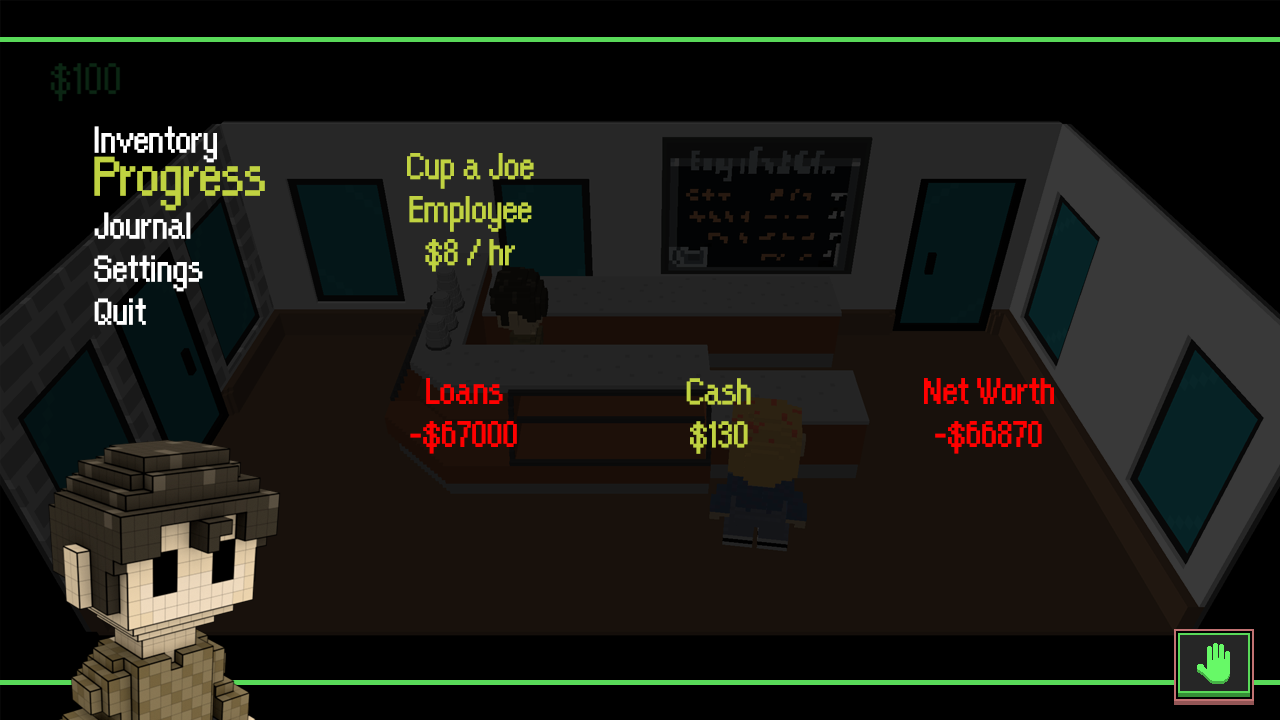
<style>
.page{position:relative;width:1280px;height:720px;background:#000000}
.page>*{position:absolute;margin:0}
.t1{font:40px/43px "OrangeKid";letter-spacing:-0.01em;color:#ffffff}
.t2{font:60px/43px "OrangeKid";letter-spacing:-0.01em;color:#c0d240}
.t3{font:40px/43px "OrangeKid";letter-spacing:-0.01em;color:#c0d241}
.t4{font:40px/43px "OrangeKid";letter-spacing:-0.01em;color:#ff0000}
</style>
<div class="page">
<p class="t1" style="left:94px;top:126px;width:171px;height:199px">Inventory<br><span class="t2">Progress<br></span>Journal<br>Settings<br>Quit</p>
<p class="t3" style="left:407px;top:153px;width:127px;height:119px;text-align:center">Cup a Joe<br>Employee<br>$8 / hr</p>
<p class="t4" style="left:410px;top:378px;width:107px;height:76px;text-align:center">Loans<br>-$67000</p>
<p class="t3" style="left:686px;top:378px;width:65px;height:76px;text-align:center">Cash<br>$130</p>
<p class="t4" style="left:924px;top:378px;width:130px;height:76px;text-align:center">Net Worth<br>-$66870</p>
</div>
